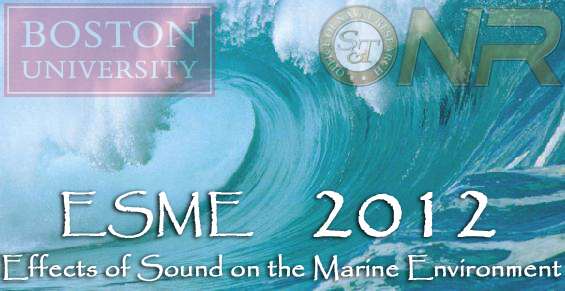
<style>
.page{position:relative;width:565px;height:291px}
.page>*{position:absolute;margin:0}
.t1{font:48px "Papyrus-Regular";color:#ffffff;font-weight:bold}
.t2{font:80px "Papyrus-Regular";color:#ffffff;font-weight:bold}
.t3{font:26.7px "Papyrus-Regular";color:#ffffff;font-weight:bold}
</style>
<div class="page">
<p class="t1" style="left:61px;top:190px;width:193px;height:48px">ESME</p>
<p class="t2" style="left:313px;top:190px;width:183px;height:48px">2012</p>
<p class="t3" style="left:2px;top:254px;width:560px;height:28px">Effects of Sound on the Marine Environment</p>
</div>
